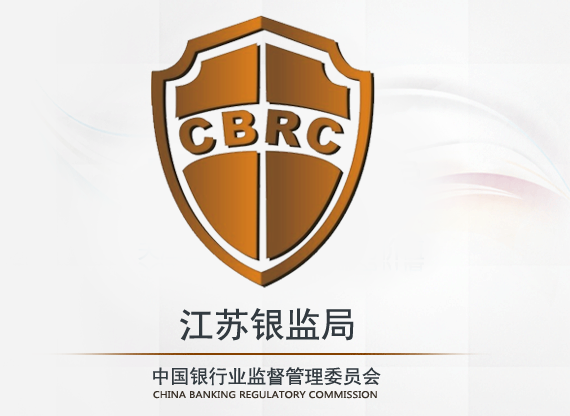
<style>
.page{position:relative;width:570px;height:416px}
.page>*{position:absolute;margin:0}
.t1{font:35px "SimHei";letter-spacing:0.01em;color:#323a40}
.t2{font:19px "SimHei";letter-spacing:0.01em;color:#323a40}
.t3{font:9px "MicrosoftYaHei";letter-spacing:0.01em;color:#3a3027;scale:1.11 1}
</style>
<div class="page">
<p class="t1" style="left:180px;top:308px;width:174px;height:33px">江苏银监局</p>
<p class="t2" style="left:153px;top:367px;width:228px;height:19px">中国银行业监督管理委员会</p>
<p class="t3" style="left:153px;top:391px;width:224px;height:8px">CHINA BANKING REGULATORY COMMISSION</p>
</div>
